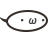
<style>
.page{position:relative;width:48px;height:32px;background:#ffffff}
.page>*{position:absolute;margin:0}
.t1{font:10px "KozGoPr6N-Regular";color:#444444;font-weight:bold}
</style>
<div class="page">
<p class="t1" style="left:20px;top:18px;width:25px;height:6px">・ω・</p>
</div>
